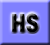
<style>
.page{position:relative;width:50px;height:45px;background:#8080ff}
.page>*{position:absolute;margin:0}
.t1{font:24px "GothicXB-HM"}
</style>
<div class="page">
<p class="t1" style="left:12px;top:13px;width:26px;height:19px">HS</p>
</div>
